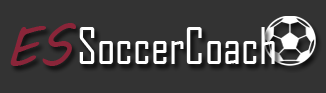
<style>
.page{position:relative;width:326px;height:93px;background:#333333}
.page>*{position:absolute;margin:0}
.t1{font:55px "MVBoli";color:#8a2539}
.t2{font:48px "AgencyFB-Reg";color:#ffffff}
</style>
<div class="page">
<p class="t1" style="left:10px;top:23px;width:66px;height:43px">ES</p>
<p class="t2" style="left:79px;top:27px;width:196px;height:37px">SoccerCoach</p>
</div>
